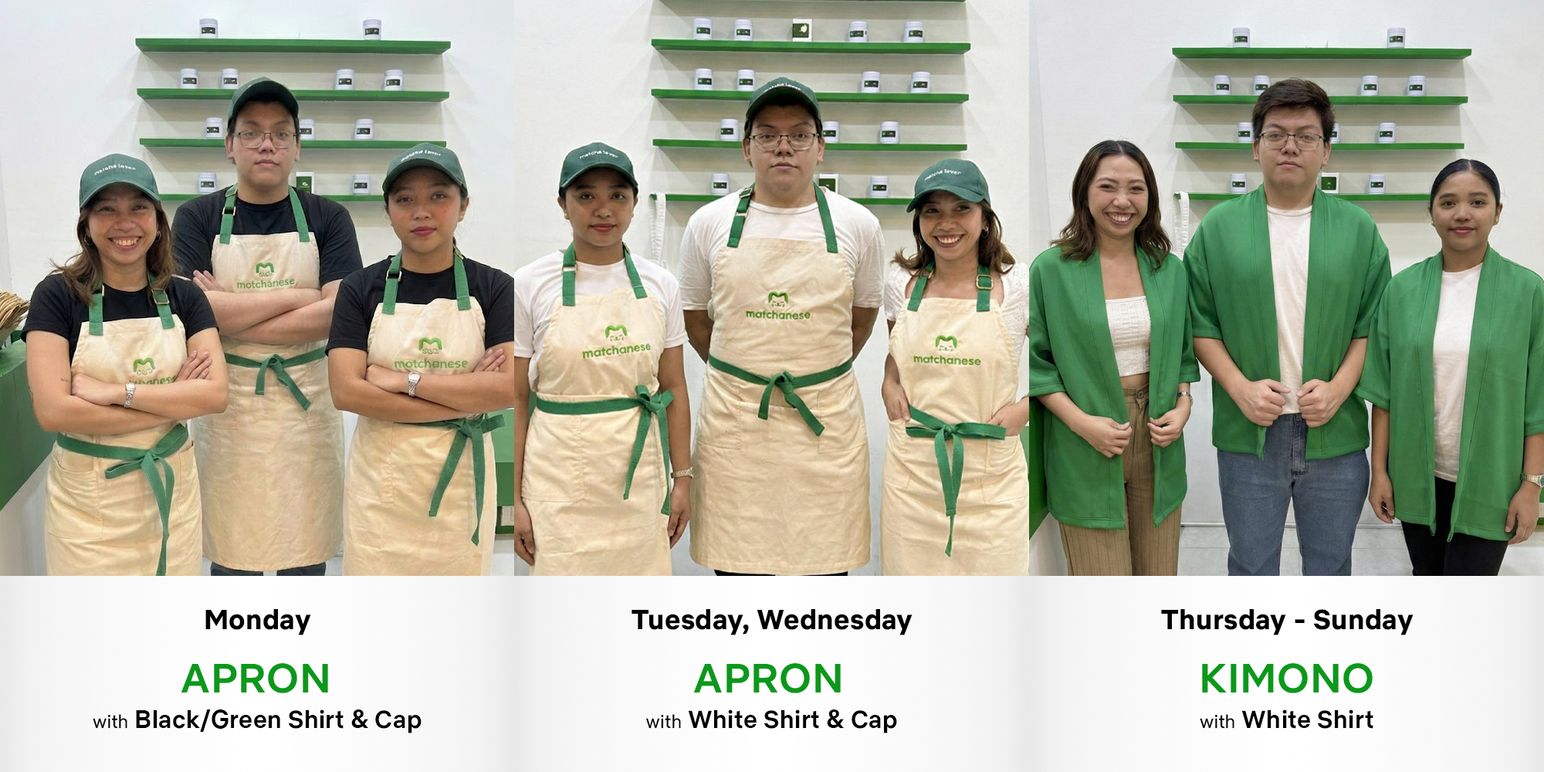
<style>
.page{position:relative;width:1544px;height:772px}
.page>*{position:absolute;margin:0}
.t1{font:27.8px "NetflixSans-Bold";letter-spacing:0.01em;color:#000000}
.t2{font:41.1px "NetflixSans-Medium";letter-spacing:0.01em;color:#0a991a}
.t3{font:24.7px "NetflixSans-Medium";letter-spacing:0.01em;color:#000000}
.t4{font:18.5px "NetflixSans-Regular";letter-spacing:0.01em;color:#000000}
</style>
<div class="page">
<p class="t1" style="left:205px;top:609px;width:106px;height:26px">Monday</p>
<p class="t1" style="left:632px;top:609px;width:281px;height:26px">Tuesday, Wednesday</p>
<p class="t1" style="left:1161px;top:609px;width:253px;height:26px">Thursday - Sunday</p>
<p class="t2" style="left:181px;top:663px;width:147px;height:30px">APRON</p>
<p class="t2" style="left:693px;top:663px;width:148px;height:30px">APRON</p>
<p class="t2" style="left:1202px;top:663px;width:171px;height:30px">KIMONO</p>
<p class="t3" style="left:93px;top:710px;width:329px;height:24px"><span class="t4">with</span> Black/Green Shirt &amp; Cap</p>
<p class="t3" style="left:646px;top:710px;width:251px;height:24px"><span class="t4">with</span> White Shirt &amp; Cap</p>
<p class="t3" style="left:1200px;top:710px;width:174px;height:19px"><span class="t4">with </span>White Shirt</p>
</div>
